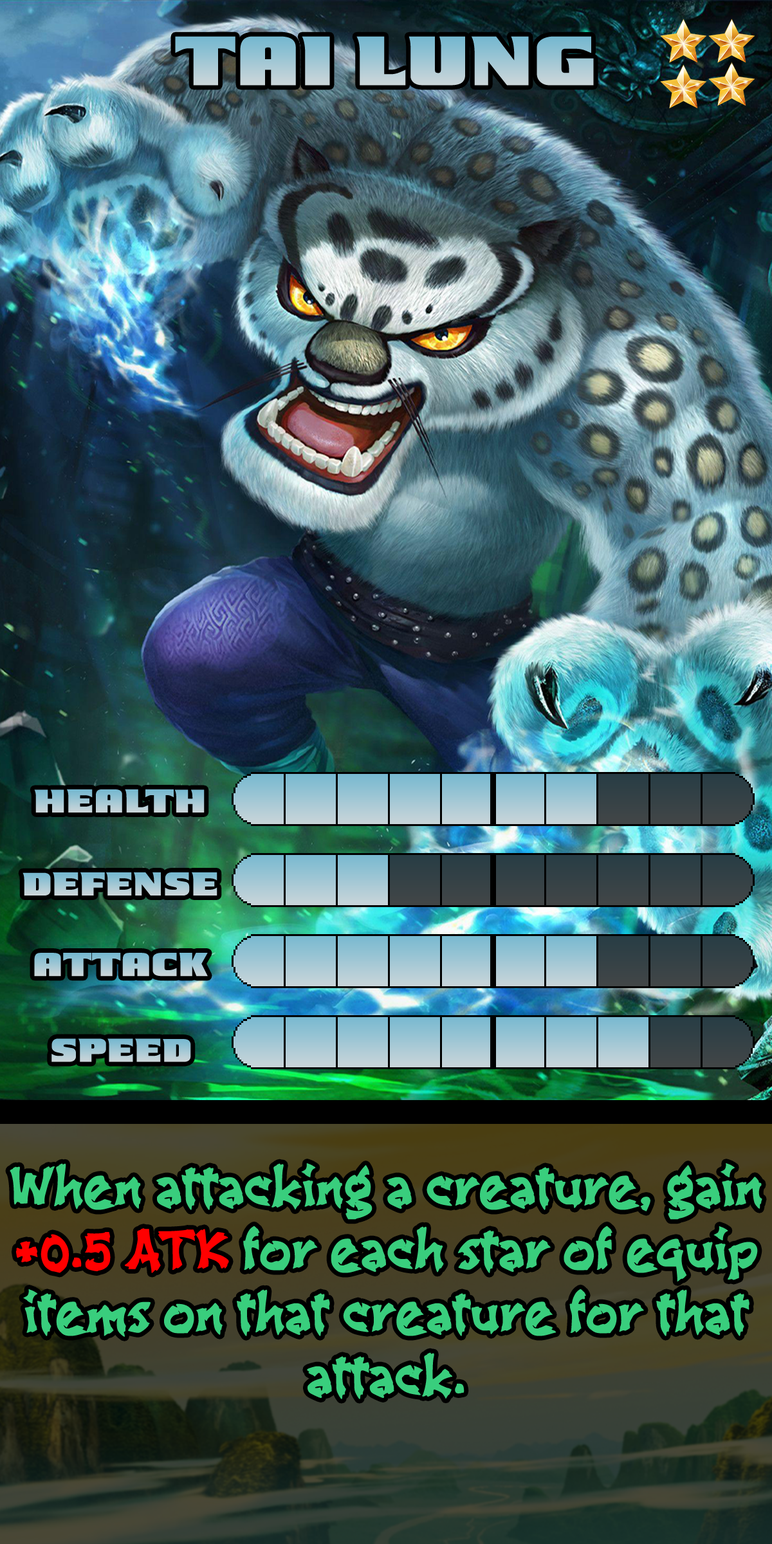
<style>
.page{position:relative;width:772px;height:1544px}
.page>*{position:absolute;margin:0}
.t1{font:122.3px "Kung-Fu-Panda"}
.t2{font:57.9px "Kung-Fu-Panda"}
.t3{font:96.5px/63.1px "bBambooGrove";color:#39ce7d}
.t4{font:96.5px/63.1px "bBambooGrove";color:#ff0000}
</style>
<div class="page">
<p class="t1" style="left:175px;top:36px;width:419px;height:50px">Tai Lung</p>
<p class="t2" style="left:34px;top:790px;width:171px;height:23px">Health</p>
<p class="t2" style="left:23px;top:873px;width:194px;height:23px">Defense</p>
<p class="t2" style="left:34px;top:953px;width:174px;height:24px">Attack</p>
<p class="t2" style="left:51px;top:1039px;width:140px;height:23px">Speed</p>
<p class="t3" style="left:10px;top:1163px;width:752px;height:237px;text-align:center">When attacking a creature, gain <span class="t4">+0.5 ATK</span> for each star of equip items on that creature for that attack.</p>
</div>
